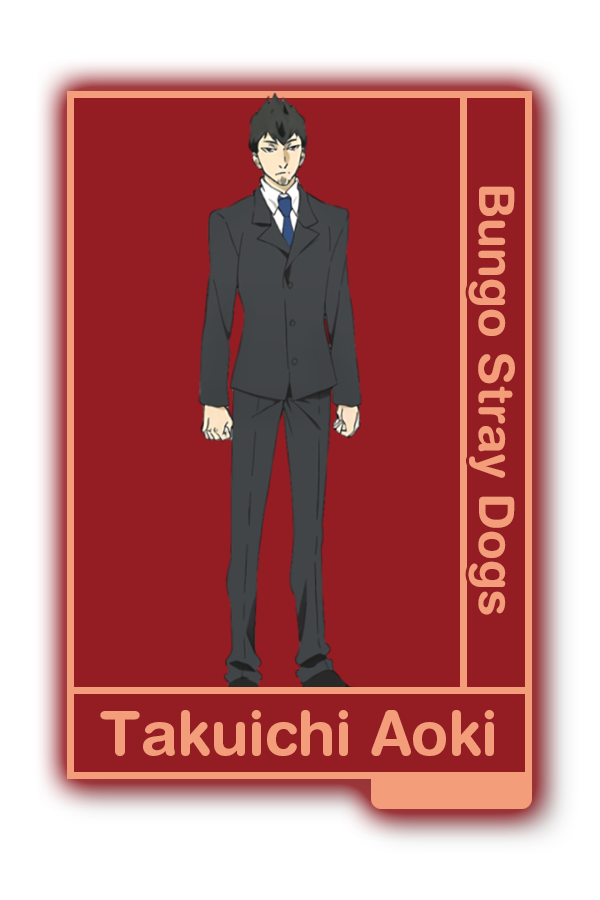
<style>
.page{position:relative;width:600px;height:900px;background:#941d23}
.page>*{position:absolute;margin:0}
.t1{font:48.8px "HelveticaRounded-Bold";color:#f39d7b}
.t2{font:60.9px "HelveticaRounded-Bold";color:#f39d7b}
</style>
<div class="page">
<p class="t1" style="left:468px;top:186px;width:47px;height:429px;rotate:90deg">Bungo Stray Dogs</p>
<p class="t2" style="left:100px;top:710px;width:394px;height:46px">Takuichi Aoki</p>
</div>
